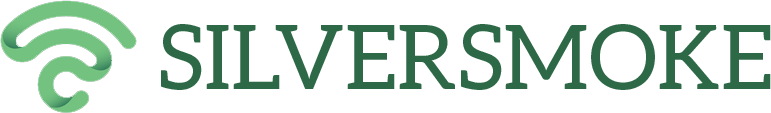
<style>
.page{position:relative;width:771px;height:113px;background:#ffffff}
.page>*{position:absolute;margin:0}
.t1{font:90px "Aleo-Regular";color:#2e6947}
</style>
<div class="page">
<p class="t1" style="left:161px;top:24px;width:610px;height:66px">SILVERSMOKE</p>
</div>
